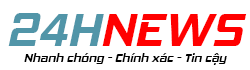
<style>
.page{position:relative;width:250px;height:70px;background:#ffffff}
.page>*{position:absolute;margin:0}
.t1{font:48px "SVN-HemiHead";color:#ff0000}
.t2{font:48px "SVN-HemiHead";color:#5195a8}
.t3{font:12px "SVN-HemiHead";color:#000000}
</style>
<div class="page">
<p class="t1" style="left:8px;top:13px;width:239px;height:33px"><span class="t2">24H</span>NEWS</p>
<p class="t3" style="left:24px;top:53px;width:203px;height:12px">Nhanh chóng - Chính xác - Tin cậy</p>
</div>
